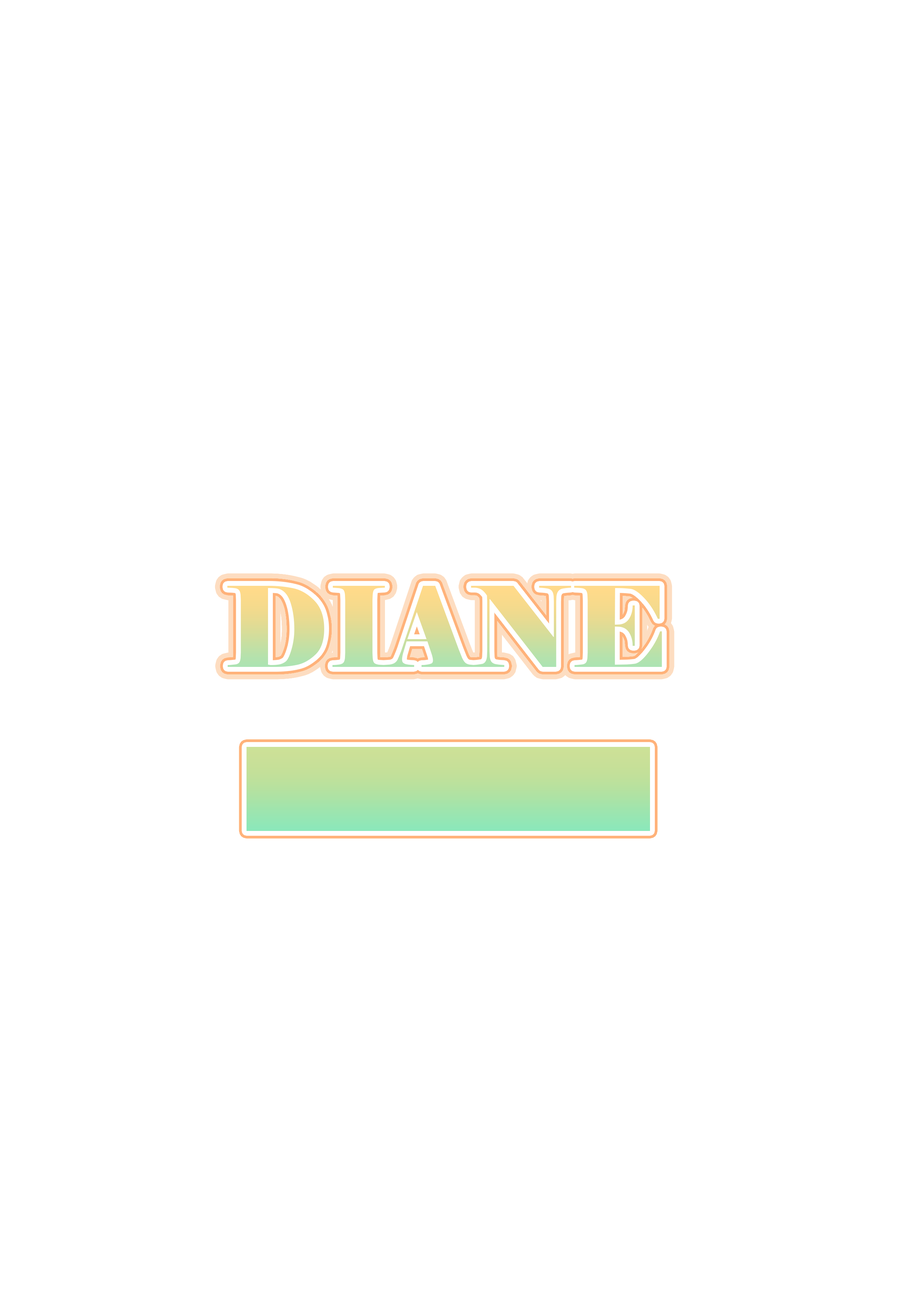
<style>
.page{position:relative;width:918px;height:1299px;background:#ffffff}
.page>*{position:absolute;margin:0}
.t1{font:111.1px "Elephant-Regular"}
</style>
<div class="page">
<p class="t1" style="left:227px;top:586px;width:435px;height:81px">DIANE</p>
</div>
